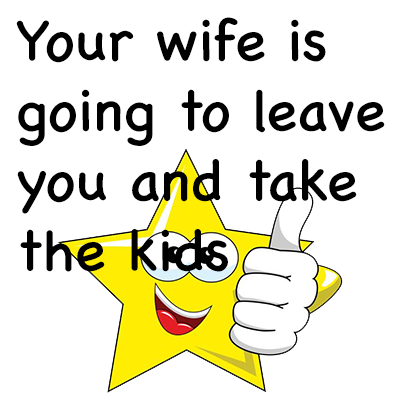
<style>
.page{position:relative;width:400px;height:400px;background:#ffffff}
.page>*{position:absolute;margin:0}
.t1{font:58.3px "ChalkboardSE-Regular";color:#000000}
</style>
<div class="page">
<p class="t1" style="left:16px;top:17px;width:369px;height:255px">Your wife is<br>going to leave<br>you and take<br>the kids</p>
</div>
